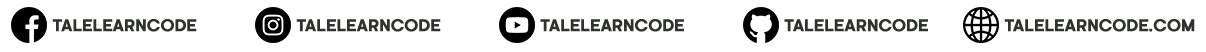
<style>
.page{position:relative;width:1206px;height:52px;background:#ffffff}
.page>*{position:absolute;margin:0}
.t1{font:15.8px "Kamerik205-Regular3";color:#2f322e;text-transform:uppercase;font-weight:bold}
</style>
<div class="page">
<p class="t1" style="left:52px;top:19px;width:145px;height:13px">TaleLearnCode</p>
<p class="t1" style="left:296px;top:19px;width:145px;height:13px">TaleLearnCode</p>
<p class="t1" style="left:540px;top:19px;width:144px;height:13px">TaleLearnCode</p>
<p class="t1" style="left:784px;top:19px;width:144px;height:13px">TaleLearnCode</p>
<p class="t1" style="left:1004px;top:19px;width:191px;height:13px">talelearncode.com</p>
</div>
